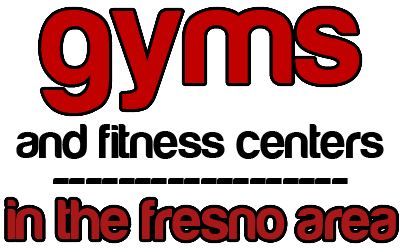
<style>
.page{position:relative;width:400px;height:252px;background:#ffffff}
.page>*{position:absolute;margin:0}
.t1{font:138.4px "Harabara";color:#c10000}
.t2{font:50px "Harabara";color:#000000}
.t3{font:58.3px "Harabara";color:#000000}
.t4{font:58.3px "Harabara";color:#a81818}
</style>
<div class="page">
<p class="t1" style="left:41px;top:9px;width:318px;height:104px">gyms</p>
<p class="t2" style="left:16px;top:124px;width:368px;height:35px">and fitness centers</p>
<p class="t3" style="left:53px;top:178px;width:295px;height:6px">------------------</p>
<p class="t4" style="left:7px;top:200px;width:389px;height:40px">in the fresno area</p>
</div>
